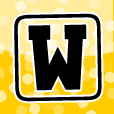
<style>
.page{position:relative;width:114px;height:114px;background:#000000}
.page>*{position:absolute;margin:0}
.t1{font:72px "babybloc";color:#000000}
</style>
<div class="page">
<p class="t1" style="left:14px;top:13px;width:88px;height:89px;rotate:-1deg">W</p>
</div>
